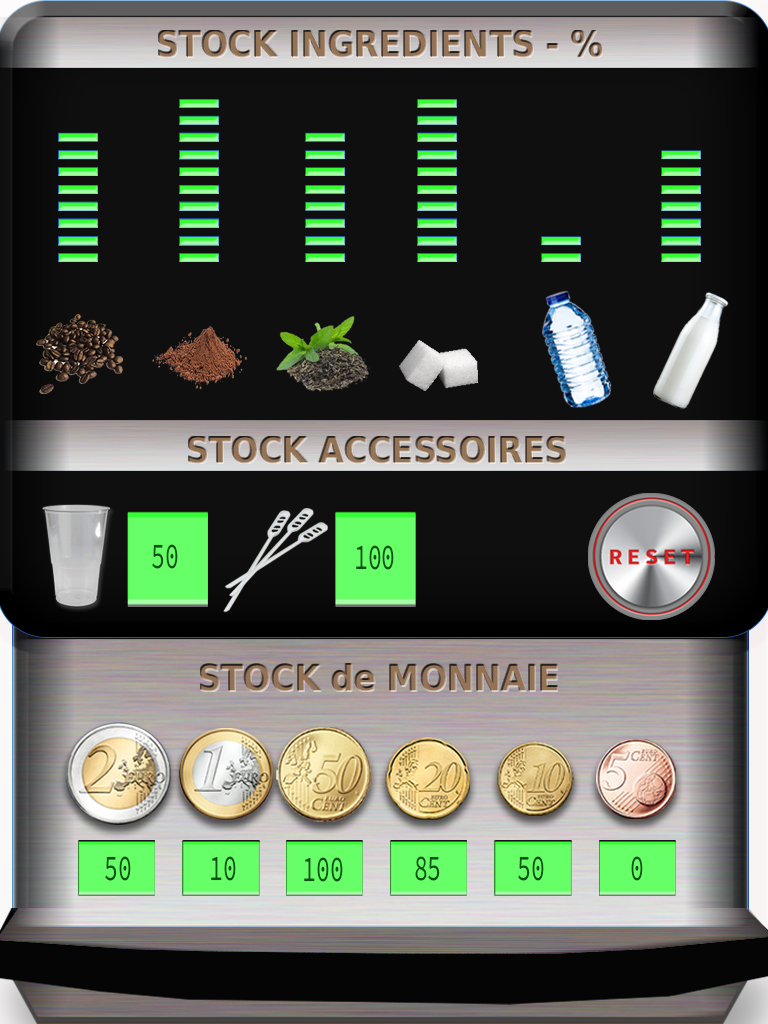
<style>
.page{position:relative;width:768px;height:1024px;background:#0f0f0f}
.page>*{position:absolute;margin:0}
.t1{font:36px "DejaVuSansCondensed-Bold"}
.t2{font:36px "SourceCodeVariable-Roman";color:#0b5215;scale:0.64 1}
</style>
<div class="page">
<p class="t1" style="left:158px;top:30px;width:445px;height:28px">STOCK INGREDIENTS - %</p>
<p class="t1" style="left:188px;top:436px;width:378px;height:28px">STOCK ACCESSOIRES</p>
<p class="t2" style="left:152px;top:544px;width:26px;height:25px">50</p>
<p class="t2" style="left:356px;top:545px;width:38px;height:25px">100</p>
<p class="t1" style="left:200px;top:663px;width:358px;height:29px">STOCK de MONNAIE</p>
<p class="t2" style="left:105px;top:856px;width:26px;height:25px">50</p>
<p class="t2" style="left:211px;top:856px;width:25px;height:25px">10</p>
<p class="t2" style="left:304px;top:857px;width:39px;height:25px">100</p>
<p class="t2" style="left:415px;top:856px;width:25px;height:25px">85</p>
<p class="t2" style="left:518px;top:856px;width:26px;height:25px">50</p>
<p class="t2" style="left:631px;top:856px;width:12px;height:25px">0</p>
</div>
